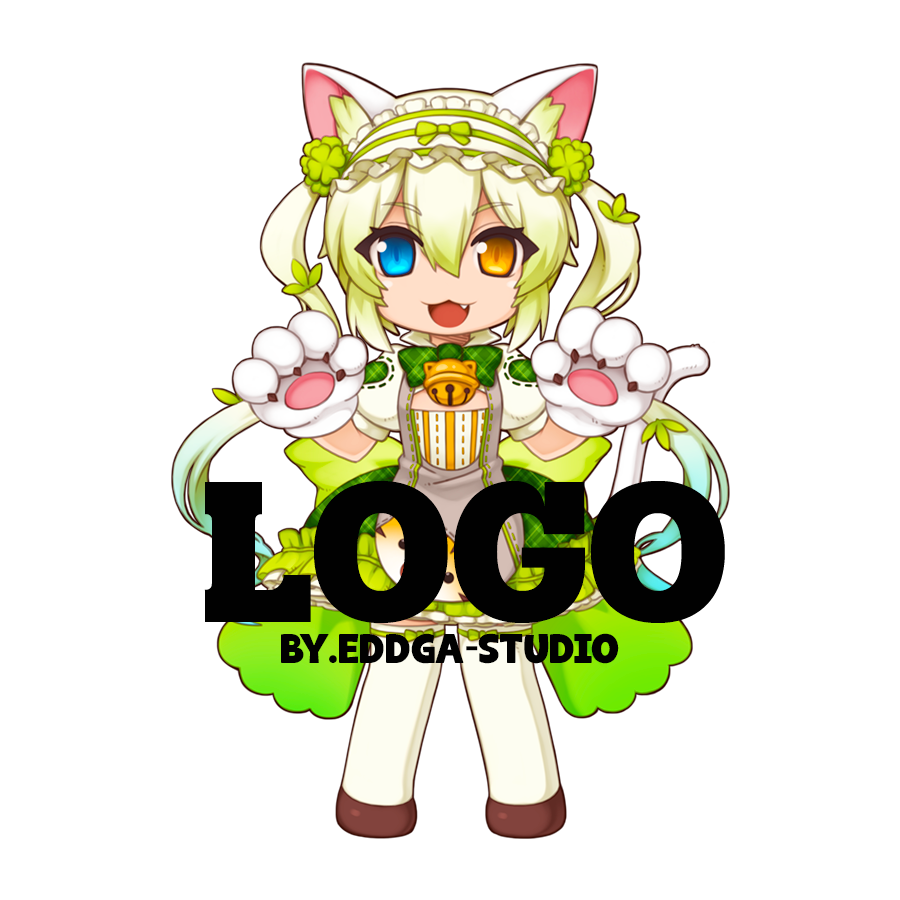
<style>
.page{position:relative;width:900px;height:900px;background:#ffffff}
.page>*{position:absolute;margin:0}
.t1{font:200px "Catesoge-DEMO";color:#010101;text-transform:uppercase}
.t2{font:48px "Oxlaide";color:#010101;text-transform:uppercase}
</style>
<div class="page">
<p class="t1" style="left:204px;top:481px;width:521px;height:142px">logo</p>
<p class="t2" style="left:281px;top:633px;width:338px;height:31px">by.eddga-studio</p>
</div>
